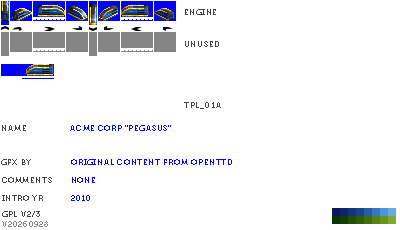
<style>
.page{position:relative;width:400px;height:230px;background:#ffffff}
.page>*{position:absolute;margin:0}
.t1{font:8px "Museo700-Regular";letter-spacing:0.075em;color:#404040;text-transform:uppercase}
.t2{font:8px "Museo700-Regular";letter-spacing:0.075em;color:#0000ff;text-transform:uppercase}
.t3{font:8px "Museo700-Regular";letter-spacing:0.075em;color:#848484;text-transform:uppercase}
</style>
<div class="page">
<p class="t1" style="left:185px;top:9px;width:31px;height:6px">engine</p>
<p class="t1" style="left:185px;top:41px;width:34px;height:6px">unused</p>
<p class="t1" style="left:184px;top:102px;width:37px;height:7px">tpl_01a</p>
<p class="t1" style="left:2px;top:125px;width:24px;height:6px">name</p>
<p class="t2" style="left:70px;top:125px;width:101px;height:6px">ACME Corp “Pegasus”</p>
<p class="t1" style="left:1px;top:159px;width:30px;height:6px">gfx by</p>
<p class="t2" style="left:71px;top:159px;width:161px;height:6px">original content from openttd</p>
<p class="t1" style="left:2px;top:177px;width:50px;height:6px">comments</p>
<p class="t2" style="left:72px;top:177px;width:23px;height:6px">none</p>
<p class="t1" style="left:2px;top:195px;width:41px;height:6px">intro yr</p>
<p class="t2" style="left:71px;top:195px;width:19px;height:6px">2010</p>
<p class="t3" style="left:2px;top:221px;width:46px;height:6px">v20260928</p>
<p class="t1" style="left:2px;top:211px;width:38px;height:6px">gpl v2/3</p>
</div>
